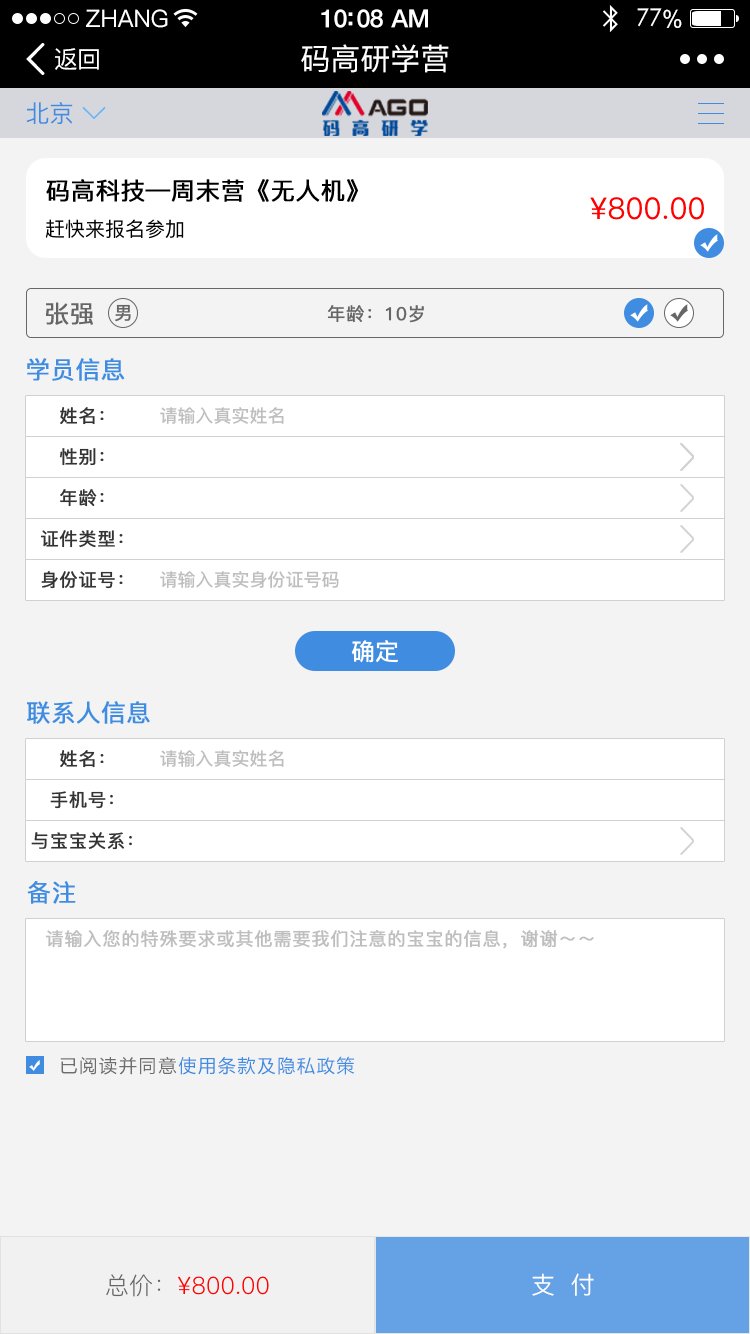
<style>
.page{position:relative;width:750px;height:1334px;background:#f3f3f3}
.page>*{position:absolute;margin:0}
.t1{font:24px "PingFang-SC-Medium";color:#ffffff}
.t2{font:25px "HelveticaNeue-Medium";letter-spacing:-0.02em;color:#ffffff}
.t3{font:24px "STXihei";letter-spacing:-0.02em;color:#ffffff}
.t4{font:24px "ArialUnicodeMS";letter-spacing:-0.02em;color:#ffffff}
.t5{font:24px "PingFang-SC-Medium";letter-spacing:-0.02em;color:#ffffff}
.t6{font:30px "PingFang-SC-Medium";color:#ffffff}
.t7{font:24px "PingFang-SC-Medium";color:#408ce1}
.t8{font:24px "PingFang-SC-Medium";color:#000000;font-weight:bold}
.t9{font:30px "PingFang-SC-Medium";color:#ff0000}
.t10{font:20px "PingFang-SC-Medium";color:#000000}
.t11{font:24px "PingFang-SC-Medium";color:#666666;font-weight:bold}
.t12{font:18px "PingFang-SC-Medium";color:#666666;font-weight:bold}
.t13{font:24px "PingFang-SC-Medium";color:#408ce1;font-weight:bold}
.t14{font:18px "PingFang-SC-Medium";color:#333333;font-weight:bold}
.t15{font:18px "PingFang-SC-Bold";color:#bebebe}
.t16{font:24px "PingFang-SC-Bold";color:#ffffff}
.t17{font:18px "PingFang-SC-Medium";color:#bebebe;font-weight:bold}
.t18{font:18px "MicrosoftYaHei";letter-spacing:0.1em;color:#408ce1}
.t19{font:18px "MicrosoftYaHei";letter-spacing:0.1em;color:#6d6d6d}
.t20{font:24px "PingFang-SC-Regular";color:#ff0000}
.t21{font:24px "PingFang-SC-Regular";color:#666666}
</style>
<div class="page">
<p class="t1" style="left:86px;top:9px;width:82px;height:19px">ZHANG</p>
<p class="t2" style="left:321px;top:9px;width:107px;height:19px">10:08 AM</p>
<p class="t3" style="left:637px;top:8px;width:45px;height:20px">77<span class="t4">%</span></p>
<p class="t5" style="left:55px;top:48px;width:44px;height:22px">返回</p>
<p class="t6" style="left:301px;top:44px;width:148px;height:29px">码高研学营</p>
<p class="t7" style="left:26px;top:102px;width:47px;height:22px">北京</p>
<p class="t8" style="left:46px;top:179px;width:312px;height:23px">码高科技—周末营《无人机》</p>
<p class="t9" style="left:590px;top:197px;width:114px;height:23px">¥800.00</p>
<p class="t10" style="left:45px;top:219px;width:139px;height:20px">赶快来报名参加</p>
<p class="t11" style="left:46px;top:302px;width:47px;height:23px">张强</p>
<p class="t12" style="left:115px;top:304px;width:16px;height:18px">男</p>
<p class="t12" style="left:327px;top:305px;width:97px;height:18px">年龄：10岁</p>
<p class="t13" style="left:27px;top:358px;width:98px;height:23px">学员信息</p>
<p class="t14" style="left:60px;top:407px;width:44px;height:18px">姓名：</p>
<p class="t15" style="left:160px;top:407px;width:124px;height:17px">请输入真实姓名</p>
<p class="t14" style="left:59px;top:448px;width:45px;height:18px">性别：</p>
<p class="t14" style="left:60px;top:489px;width:44px;height:18px">年龄：</p>
<p class="t14" style="left:40px;top:530px;width:83px;height:18px">证件类型：</p>
<p class="t14" style="left:41px;top:571px;width:82px;height:18px">身份证号：</p>
<p class="t15" style="left:160px;top:571px;width:179px;height:17px">请输入真实身份证号码</p>
<p class="t16" style="left:351px;top:640px;width:47px;height:23px">确定</p>
<p class="t13" style="left:27px;top:701px;width:123px;height:23px">联系人信息</p>
<p class="t14" style="left:60px;top:750px;width:44px;height:18px">姓名：</p>
<p class="t15" style="left:160px;top:750px;width:124px;height:17px">请输入真实姓名</p>
<p class="t14" style="left:50px;top:791px;width:63px;height:18px">手机号：</p>
<p class="t14" style="left:31px;top:832px;width:101px;height:18px">与宝宝关系：</p>
<p class="t13" style="left:27px;top:881px;width:49px;height:23px">备注</p>
<p class="t17" style="left:45px;top:930px;width:549px;height:19px">请输入您的特殊要求或其他需要我们注意的宝宝的信息，谢谢～～</p>
<p class="t18" style="left:60px;top:1056px;width:295px;height:19px"><span class="t19">已阅读并同意</span>使用条款及隐私政策</p>
<p class="t20" style="left:106px;top:1274px;width:163px;height:23px"><span class="t21">总价：</span>¥800.00</p>
<p class="t1" style="left:532px;top:1273px;width:62px;height:23px">支  付</p>
</div>
